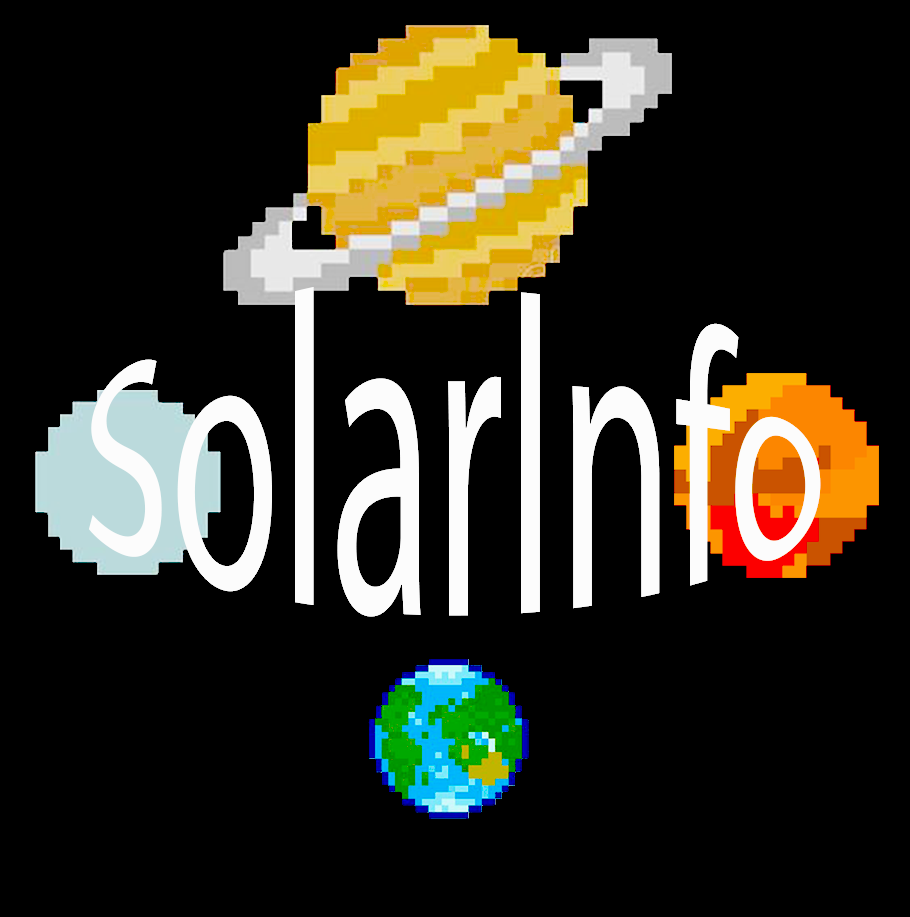
<style>
.page{position:relative;width:910px;height:917px;background:#000000}
.page>*{position:absolute;margin:0}
.t1{font:200px "MyriadPro-Regular";color:#ffffff}
</style>
<div class="page">
<p class="t1" style="left:88px;top:286px;width:733px;height:331px">SolarInfo</p>
</div>
